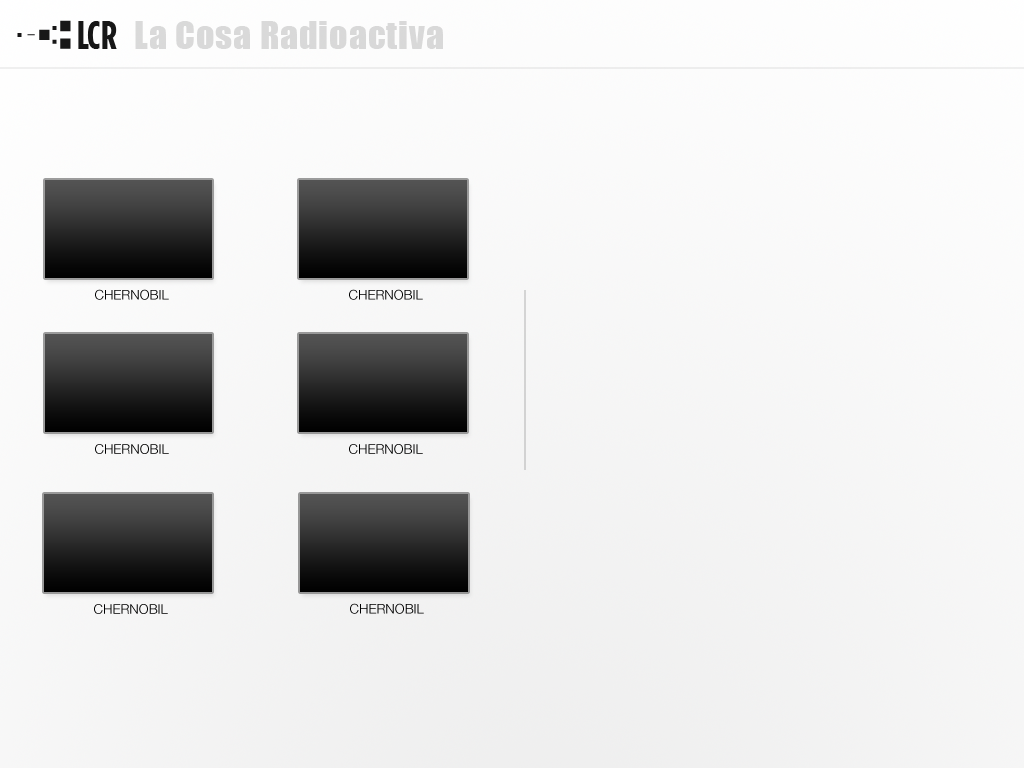
<style>
.page{position:relative;width:1024px;height:768px}
.page>*{position:absolute;margin:0}
.t1{font:36px "Impact";letter-spacing:0.025em;color:#d9d9d9}
.t2{font:13.4px "HelveticaNeue-Light";color:#000000}
</style>
<div class="page">
<p class="t1" style="left:135px;top:21px;width:308px;height:28px">La Cosa Radioactiva</p>
<p class="t2" style="left:95px;top:289px;width:74px;height:11px">CHERNOBIL</p>
<p class="t2" style="left:349px;top:289px;width:74px;height:11px">CHERNOBIL</p>
<p class="t2" style="left:95px;top:444px;width:74px;height:10px">CHERNOBIL</p>
<p class="t2" style="left:349px;top:444px;width:74px;height:10px">CHERNOBIL</p>
<p class="t2" style="left:94px;top:604px;width:74px;height:10px">CHERNOBIL</p>
<p class="t2" style="left:350px;top:603px;width:74px;height:11px">CHERNOBIL</p>
</div>
